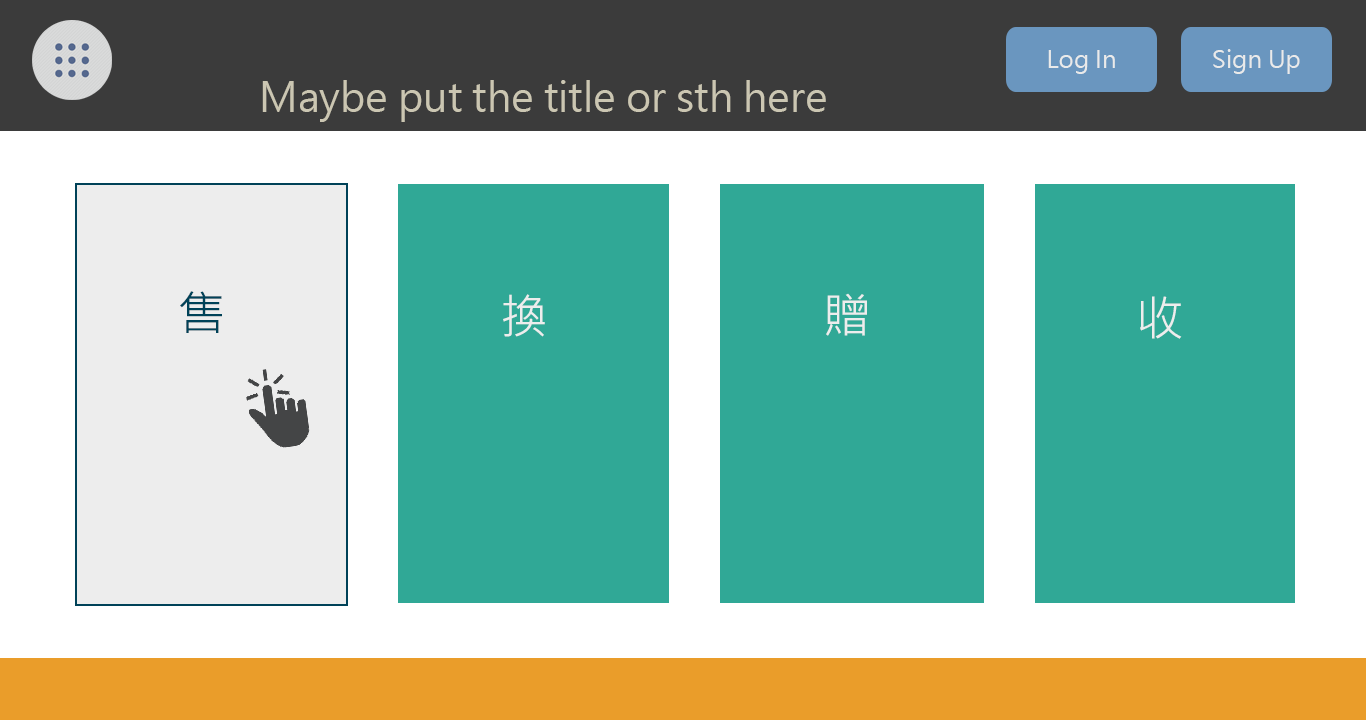
<style>
.page{position:relative;width:1366px;height:720px;background:#30a896}
.page>*{position:absolute;margin:0}
.t1{font:24px "MicrosoftJhengHeiRegular";color:#eaeaea}
.t2{font:40px "MicrosoftJhengHeiRegular";color:#cbc6b2}
.t3{font:47.8px "MicrosoftJhengHeiRegular";color:#004258}
.t4{font:47.8px "MicrosoftJhengHeiRegular";color:#ededed}
</style>
<div class="page">
<p class="t1" style="left:1048px;top:50px;width:67px;height:24px">Log In</p>
<p class="t1" style="left:1213px;top:49px;width:87px;height:25px">Sign Up</p>
<p class="t2" style="left:262px;top:80px;width:564px;height:42px">Maybe put the title or sth here</p>
<p class="t3" style="left:180px;top:291px;width:42px;height:42px">售</p>
<p class="t4" style="left:503px;top:294px;width:42px;height:43px">換</p>
<p class="t4" style="left:826px;top:293px;width:41px;height:43px">贈</p>
<p class="t4" style="left:1140px;top:296px;width:42px;height:43px">收</p>
</div>
